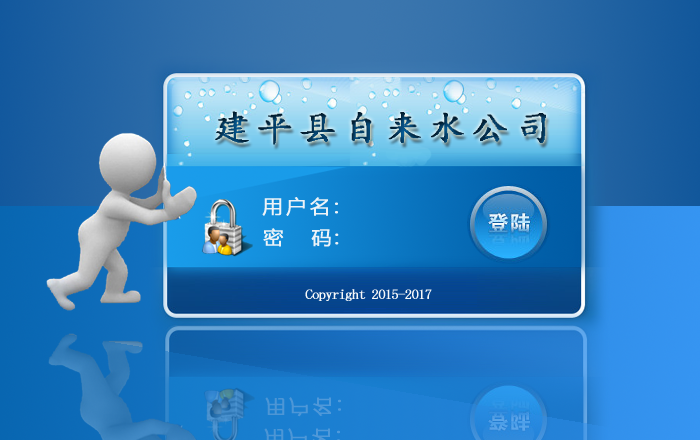
<style>
.page{position:relative;width:700px;height:440px}
.page>*{position:absolute;margin:0}
.t1{font:35px "¿¬Ìå";letter-spacing:0.16em;font-weight:bold;scale:1.06 1}
.t2{font:19px "MicrosoftYaHei";letter-spacing:0.16em;color:#edf3f7;font-weight:bold;scale:1.06 1}
.t3{font:19px "MicrosoftYaHei";letter-spacing:0.1em;color:#edf3f7;font-weight:bold;scale:1.06 1}
.t4{font:14px "SimSun";letter-spacing:-0.08em;color:#f6f8f9;font-weight:bold;scale:1.06 1}
</style>
<div class="page">
<p class="t1" style="left:215px;top:111px;width:331px;height:34px">建平县自来水公司</p>
<p class="t2" style="left:262px;top:197px;width:76px;height:19px">用户名:</p>
<p class="t3" style="left:263px;top:228px;width:76px;height:19px">密   码:</p>
<p class="t4" style="left:305px;top:289px;width:127px;height:12px">Copyright 2015-2017</p>
</div>
